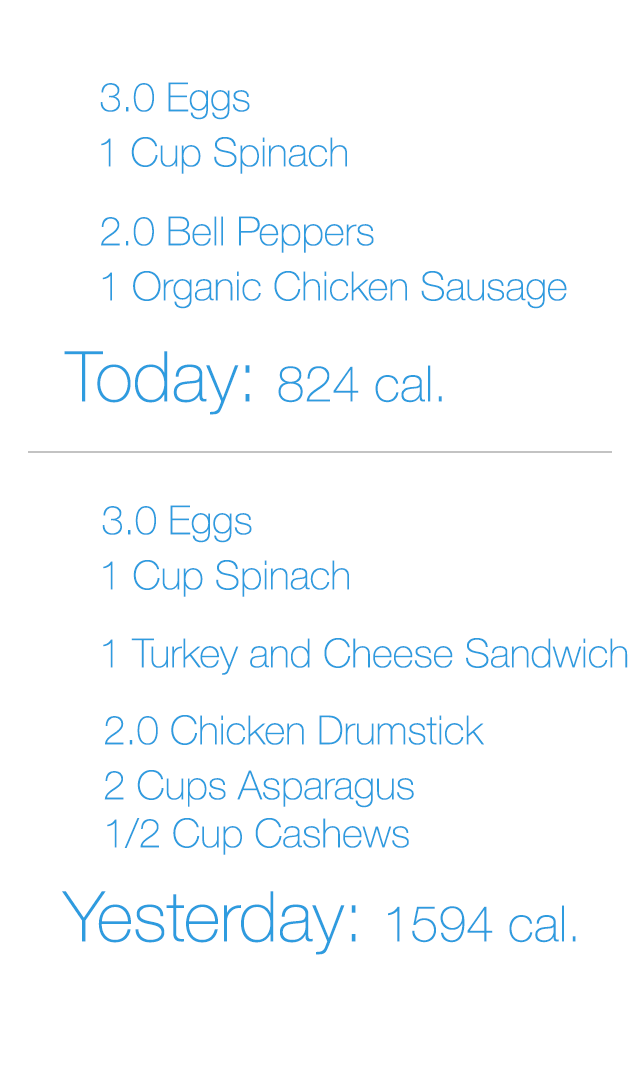
<style>
.page{position:relative;width:640px;height:1076px;background:#ffffff}
.page>*{position:absolute;margin:0}
.t1{font:40px "HelveticaNeue-Thin";color:#2e9cdf}
.t2{font:50px "HelveticaNeue-Thin";color:#2e9cdf}
.t3{font:70px "HelveticaNeue-Thin";color:#2e9cdf}
</style>
<div class="page">
<p class="t1" style="left:100px;top:82px;width:150px;height:38px">3.0 Eggs</p>
<p class="t1" style="left:101px;top:137px;width:246px;height:37px">1 Cup Spinach</p>
<p class="t1" style="left:101px;top:216px;width:273px;height:37px">2.0 Bell Peppers</p>
<p class="t1" style="left:102px;top:271px;width:465px;height:38px">1 Organic Chicken Sausage</p>
<p class="t2" style="left:64px;top:351px;width:378px;height:64px"><span class="t3">Today: </span>824 cal.</p>
<p class="t1" style="left:102px;top:505px;width:150px;height:38px">3.0 Eggs</p>
<p class="t1" style="left:103px;top:560px;width:246px;height:37px">1 Cup Spinach</p>
<p class="t1" style="left:103px;top:638px;width:525px;height:37px">1 Turkey and Cheese Sandwich</p>
<p class="t1" style="left:105px;top:715px;width:379px;height:30px">2.0 Chicken Drumstick</p>
<p class="t1" style="left:104px;top:770px;width:310px;height:85px">2 Cups Asparagus<br>1/2 Cup Cashews</p>
<p class="t3" style="left:62px;top:891px;width:514px;height:64px">Yesterday: <span class="t2">1594 cal.</span></p>
</div>
